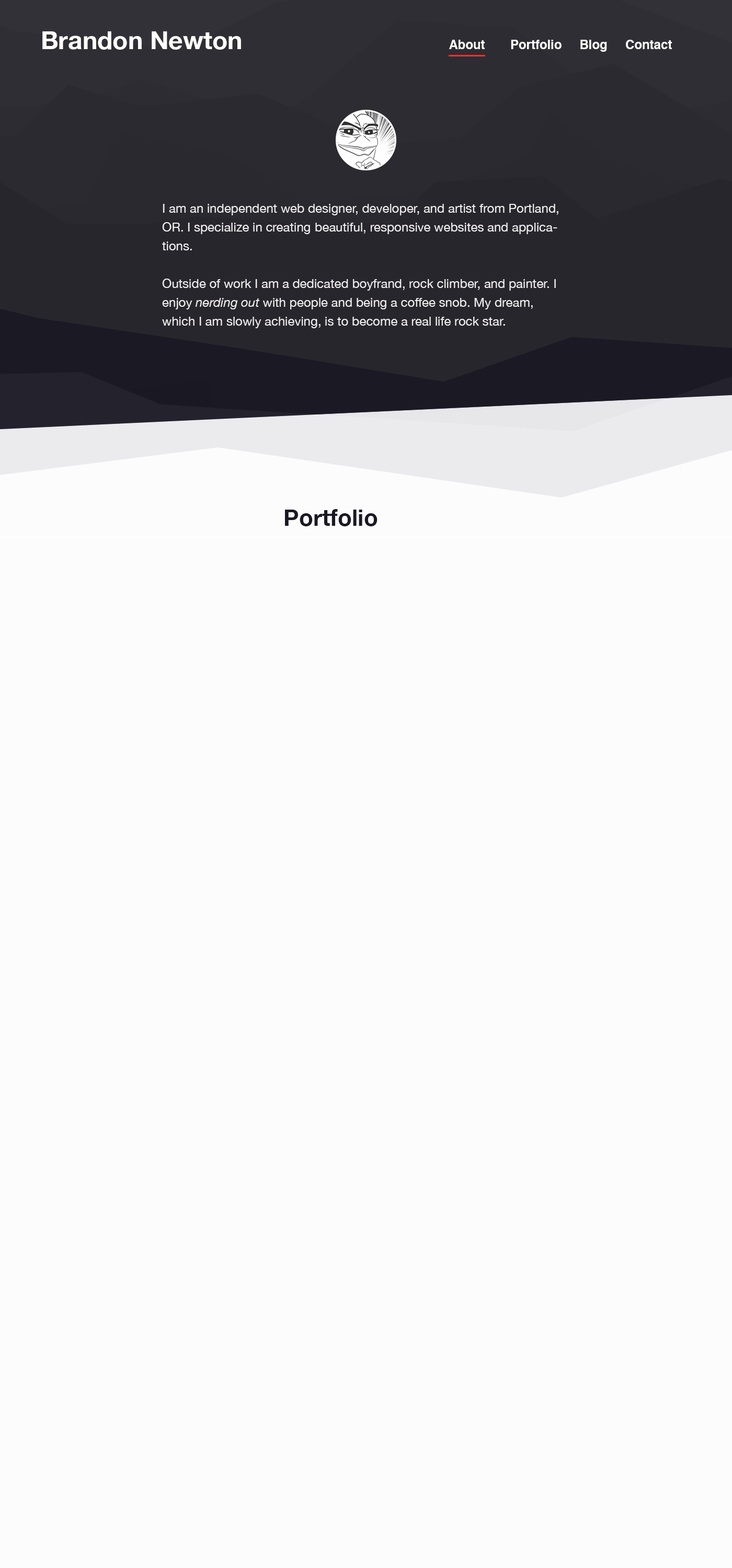
<style>
.page{position:relative;width:732px;height:1568px;background:#fcfcfd}
.page>*{position:absolute;margin:0}
.t1{font:25.1px "HelveticaNeue-Bold";color:#fffffa}
.t2{font:12.5px "Helvetica-Bold";color:#fffffa}
.t3{font:12.5px/18.8px "HelveticaNeue";color:#eeeded}
.t4{font:12.5px/18.8px "HelveticaNeue-Italic";color:#eeeded}
.t5{font:23px "HelveticaNeue-Bold";color:#1a1923}
</style>
<div class="page">
<p class="t1" style="left:42px;top:31px;width:199px;height:19px">Brandon Newton</p>
<p class="t2" style="left:449px;top:40px;width:36px;height:9px">About</p>
<p class="t2" style="left:511px;top:40px;width:50px;height:9px">Portfolio</p>
<p class="t2" style="left:580px;top:40px;width:27px;height:12px">Blog</p>
<p class="t2" style="left:626px;top:40px;width:46px;height:9px">Contact</p>
<p class="t3" style="left:162px;top:204px;width:396px;height:124px">I am an independent web designer, developer, and artist from Portland, OR. I specialize in creating beautiful, responsive websites and applications.<br><br>Outside of work I am a dedicated boyfrand, rock climber, and painter. I enjoy <span class="t4">nerding out</span> with people and being a coffee snob. My dream, which I am slowly achieving, is to become a real life rock star.</p>
<p class="t5" style="left:285px;top:509px;width:92px;height:17px">Portfolio</p>
</div>
